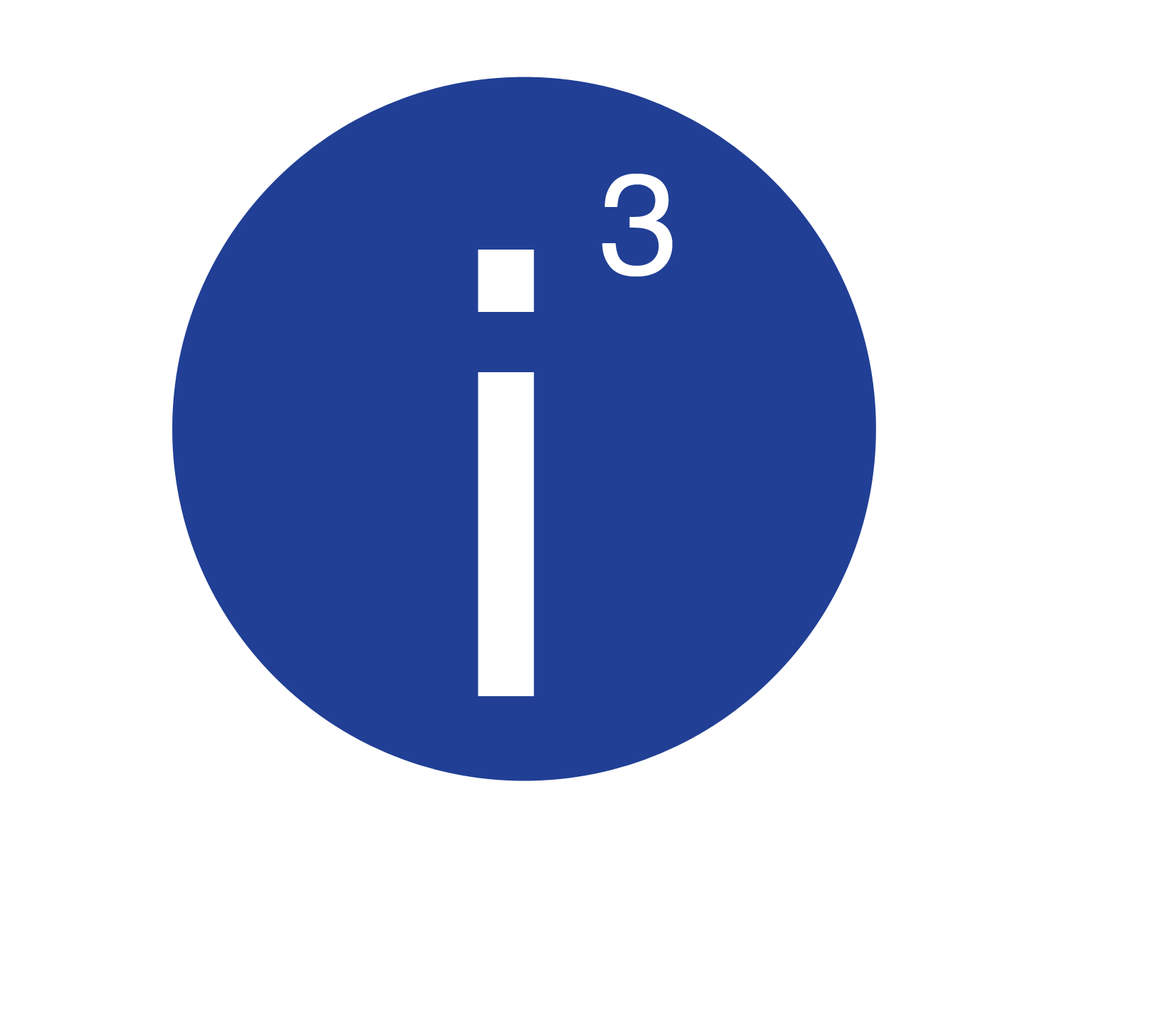
<style>
.page{position:relative;width:1166px;height:1023px;background:#ffffff}
.page>*{position:absolute;margin:0}
.t1{font:143.1px "Helvetica";color:#ffffff}
.t2{font:622.8px "Helvetica";color:#ffffff}
</style>
<div class="page">
<p class="t1" style="left:602px;top:174px;width:71px;height:102px">3</p>
<p class="t2" style="left:478px;top:249px;width:56px;height:447px">i</p>
</div>
